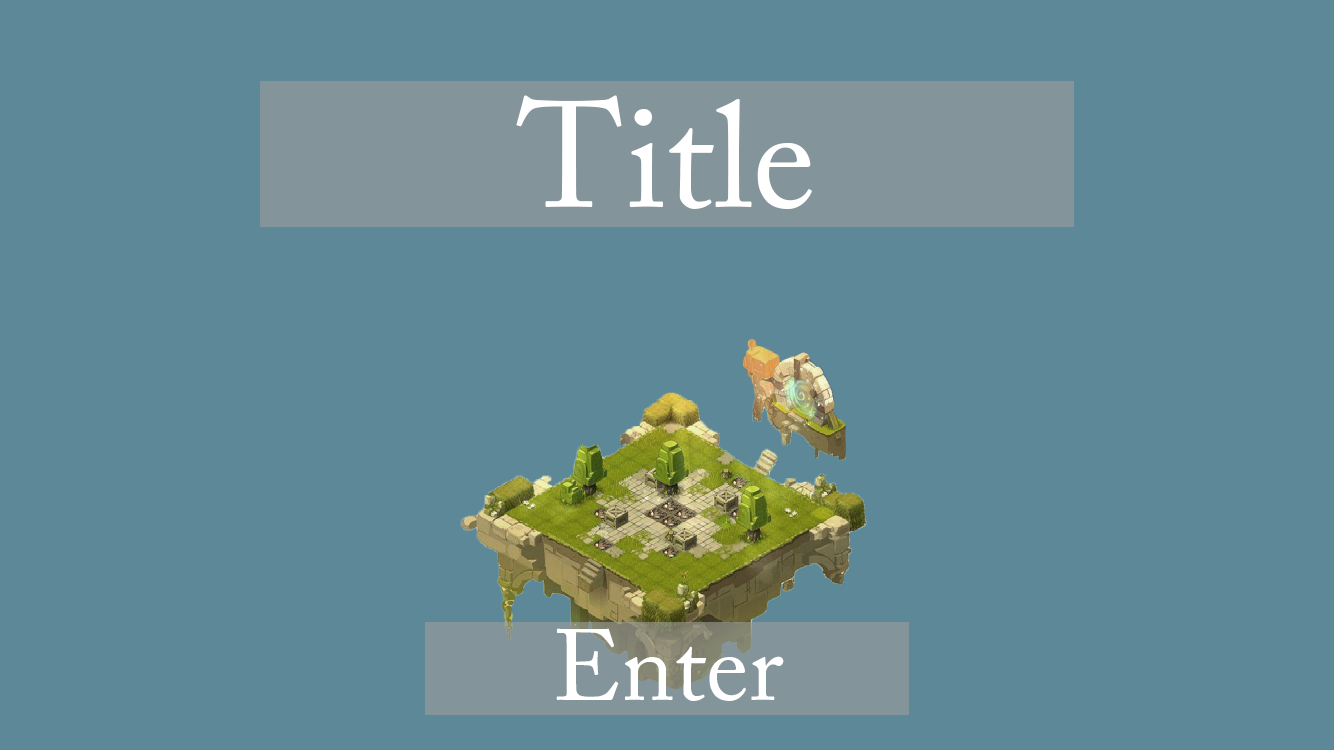
<style>
.page{position:relative;width:1334px;height:750px;background:#5c8898}
.page>*{position:absolute;margin:0}
.t1{font:150px "ACaslonPro-Regular";color:#ffffff}
.t2{font:100px "ACaslonPro-Regular";color:#ffffff}
</style>
<div class="page">
<p class="t1" style="left:516px;top:95px;width:296px;height:114px">Title</p>
<p class="t2" style="left:556px;top:628px;width:228px;height:73px">Enter</p>
</div>
